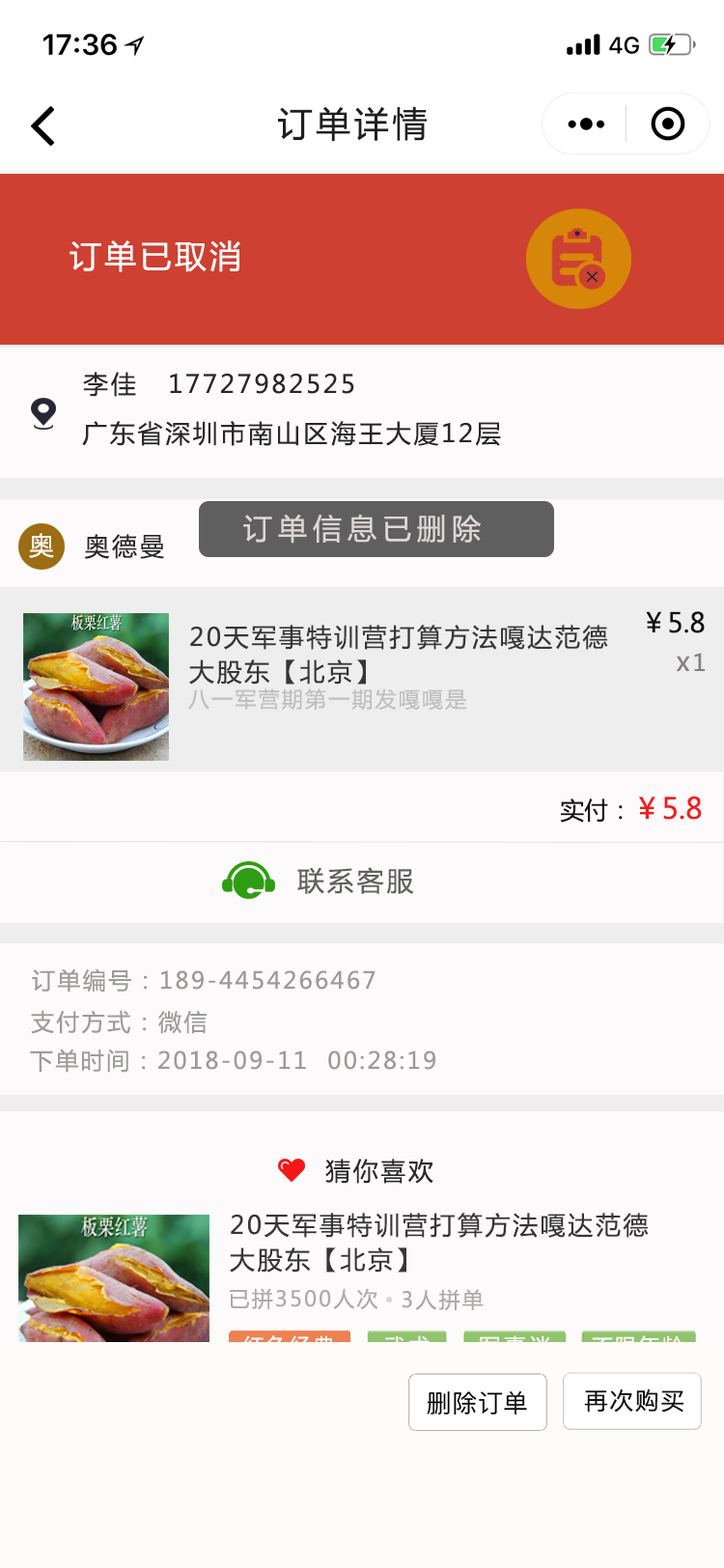
<style>
.page{position:relative;width:724px;height:1568px;background:#fcfafa}
.page>*{position:absolute;margin:0}
.t1{font:34.8px "MicrosoftYaHei";letter-spacing:0.1em;color:#201f20}
.t2{font:31.9px "MicrosoftYaHei";letter-spacing:0.1em;color:#fcf9f9}
.t3{font:25.1px "MicrosoftYaHei";letter-spacing:0.1em;color:#282727}
.t4{font:29px "MicrosoftYaHei";letter-spacing:0.2em;color:#ddd7d7}
.t5{font:25.1px "MicrosoftYaHei";letter-spacing:0.1em;color:#f9f7f2}
.t6{font:27px "MicrosoftYaHei";color:#121111}
.t7{font:25.1px/34.8px "MicrosoftYaHei";letter-spacing:0.1em;color:#373636}
.t8{font:27px "MicrosoftYaHei";letter-spacing:0.1em;color:#848080}
.t9{font:23.2px "MicrosoftYaHei";letter-spacing:0.1em;color:#848080}
.t10{font:21.2px "MicrosoftYaHei";letter-spacing:0.1em;color:#c0bebe}
.t11{font:29px "MicrosoftYaHei";color:#f31c1c}
.t12{font:24.1px "MicrosoftYaHei";color:#121111}
.t13{font:27px "MicrosoftYaHei";letter-spacing:0.1em;color:#5f625e}
.t14{font:23.2px "MicrosoftYaHei";letter-spacing:0.1em;color:#9b9c9a}
.t15{font:25.1px "MicrosoftYaHei";letter-spacing:0.1em;color:#2a2929}
.t16{font:21.2px "MicrosoftYaHei";letter-spacing:0.1em;color:#adaaaa}
.t17{font:21.2px "MicrosoftYaHei";letter-spacing:0.1em;color:#fdfcfb}
.t18{font:21.2px "MicrosoftYaHei";letter-spacing:0.2em;color:#fdfcfb}
.t19{font:23.2px "MicrosoftYaHei";letter-spacing:0.1em;color:#111112}
</style>
<div class="page">
<p class="t1" style="left:278px;top:106px;width:149px;height:35px">订单详情</p>
<p class="t2" style="left:70px;top:240px;width:170px;height:32px">订单已取消</p>
<p class="t3" style="left:83px;top:372px;width:271px;height:25px">李佳   17727982525</p>
<p class="t3" style="left:82px;top:421px;width:419px;height:25px">广东省深圳市南山区海王大厦12层</p>
<p class="t4" style="left:243px;top:514px;width:238px;height:30px">订单信息已删除</p>
<p class="t5" style="left:29px;top:533px;width:25px;height:25px">奥</p>
<p class="t3" style="left:84px;top:534px;width:80px;height:25px">奥德曼</p>
<p class="t6" style="left:646px;top:611px;width:59px;height:22px">￥5.8</p>
<p class="t7" style="left:189px;top:625px;width:419px;height:60px">20天军事特训营打算方法嘎达范德<br>大股东【北京】</p>
<p class="t8" style="left:676px;top:653px;width:30px;height:18px">x<span class="t9">1</span></p>
<p class="t10" style="left:188px;top:688px;width:279px;height:23px">八一军营期第一期发嘎嘎是</p>
<p class="t11" style="left:560px;top:796px;width:142px;height:27px"><span class="t12">实付：</span>￥5.8</p>
<p class="t13" style="left:297px;top:867px;width:117px;height:27px">联系客服</p>
<p class="t14" style="left:32px;top:968px;width:344px;height:25px">订单编号：189-4454266467</p>
<p class="t14" style="left:31px;top:1010px;width:176px;height:24px">支付方式：微信</p>
<p class="t14" style="left:30px;top:1049px;width:405px;height:24px">下单时间：2018-09-11  00:28:19</p>
<p class="t15" style="left:325px;top:1159px;width:109px;height:25px">猜你喜欢</p>
<p class="t7" style="left:230px;top:1213px;width:419px;height:60px">20天军事特训营打算方法嘎达范德<br>大股东【北京】</p>
<p class="t16" style="left:230px;top:1288px;width:148px;height:22px">已拼3500人次</p>
<p class="t16" style="left:402px;top:1289px;width:82px;height:22px">3人拼单</p>
<p class="t17" style="left:243px;top:1335px;width:91px;height:22px">红色经典</p>
<p class="t18" style="left:479px;top:1335px;width:72px;height:22px">军事迷</p>
<p class="t19" style="left:584px;top:1389px;width:100px;height:24px">再次购买</p>
</div>
